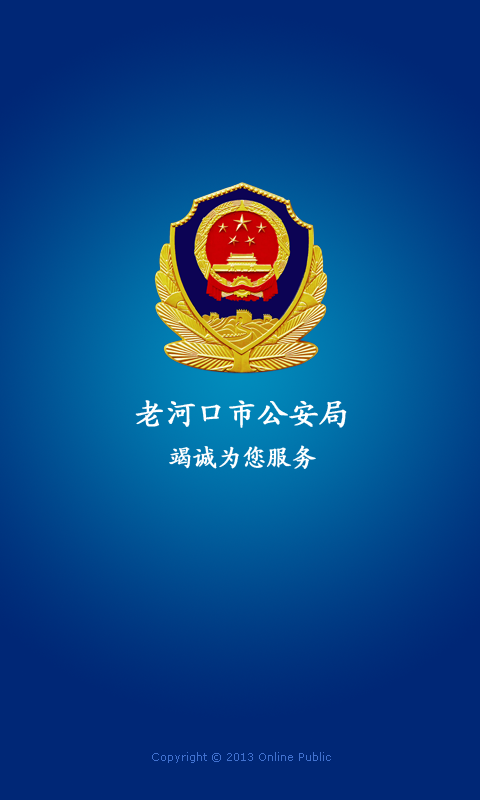
<style>
.page{position:relative;width:480px;height:800px}
.page>*{position:absolute;margin:0}
.t1{font:30px/42px "KaiTi_GB2312";color:#ffffff;font-weight:bold}
.t2{font:24px/42px "KaiTi_GB2312";color:#ffffff;font-weight:bold}
.t3{font:11px "Verdana";color:#4171cf}
</style>
<div class="page">
<p class="t1" style="left:135px;top:400px;width:212px;height:69px;text-align:center">老河口市公安局<br><span class="t2">竭诚为您服务</span></p>
<p class="t3" style="left:152px;top:752px;width:179px;height:11px">Copyright © 2013 Online Public</p>
</div>
